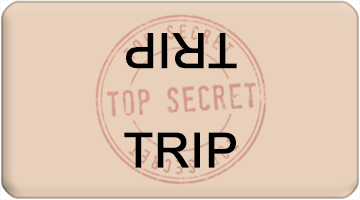
<style>
.page{position:relative;width:360px;height:200px;background:#e8d0bb}
.page>*{position:absolute;margin:0}
.t1{font:48px "ArialMT";color:#000000;font-weight:bold}
</style>
<div class="page">
<p class="t1" style="left:126px;top:33px;width:111px;height:36px;rotate:180deg">TRIP</p>
<p class="t1" style="left:124px;top:132px;width:112px;height:36px">TRIP</p>
</div>
